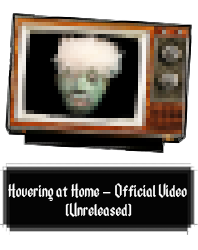
<style>
.page{position:relative;width:198px;height:250px;background:#ffffff}
.page>*{position:absolute;margin:0}
.t1{font:16px "Ancient-Modern-Tales";color:#ffffff}
.t2{font:16px "MyriadPro-Regular";color:#ffffff}
</style>
<div class="page">
<p class="t1" style="left:8px;top:183px;width:179px;height:34px;text-align:center">Hovering at Home <span class="t2">–</span>  Official Video <br>(Unreleased)</p>
</div>
